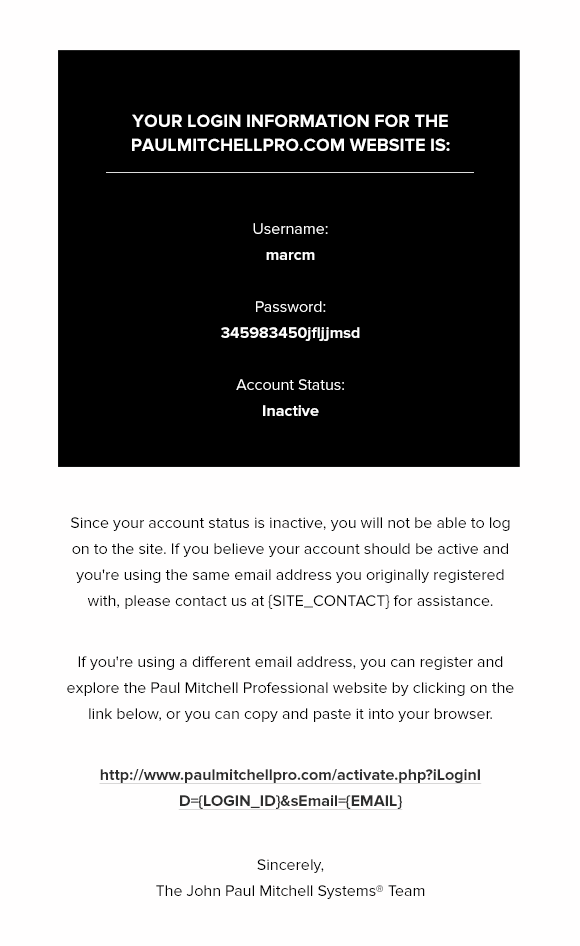
<style>
.page{position:relative;width:580px;height:946px;background:#fffefe}
.page>*{position:absolute;margin:0}
.t1{font:18px/24px "ProximaNova-Bold";color:#ffffff;text-transform:uppercase}
.t2{font:16px/26px "ProximaNova-Bold";color:#fefefe}
.t3{font:16px/26px "ProximaNova-Regular";color:#fefefe}
.t4{font:16px/26px "ProximaNova-Regular";color:#000000}
.t5{font:16px/26px "ProximaNova-Bold";color:#2e2e2e;text-decoration:underline}
</style>
<div class="page">
<p class="t1" style="left:132px;top:114px;width:318px;height:37px;text-align:center">your login information for the paulmitchellpro.com website is:</p>
<p class="t2" style="left:221px;top:223px;width:139px;height:193px;text-align:center"><span class="t3">Username:<br></span>marcm<br><span class="t3"><br>Password:<br></span>345983450jfljjmsd<br><br><span class="t3">Account Status:<br></span>Inactive</p>
<p class="t4" style="left:71px;top:517px;width:439px;height:92px;text-align:center">Since your account status is inactive, you will not be able to log on to the site. If you believe your account should be active and you're using the same email address you originally registered with, please contact us at {SITE_CONTACT} for assistance.</p>
<p class="t4" style="left:67px;top:656px;width:447px;height:66px;text-align:center">If you're using a different email address, you can register and explore the Paul Mitchell Professional website by clicking on the link below, or you can copy and paste it into your browser.</p>
<p class="t5" style="left:99px;top:769px;width:383px;height:41px;text-align:center">http://www.paulmitchellpro.com/activate.php?iLoginID={LOGIN_ID}&amp;sEmail={EMAIL}</p>
<p class="t4" style="left:156px;top:859px;width:269px;height:40px;text-align:center">Sincerely, <br>The John Paul Mitchell Systems® Team</p>
</div>
